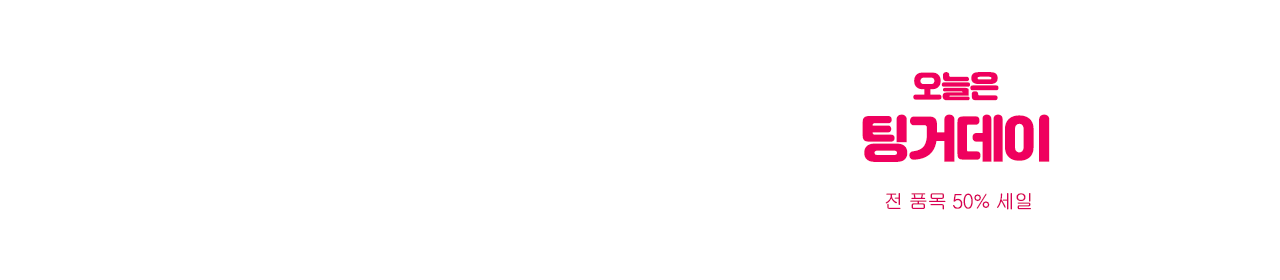
<style>
.page{position:relative;width:1280px;height:280px;background:#ffffff}
.page>*{position:absolute;margin:0}
.t1{font:50px "JalnanOTF";letter-spacing:-0.05em;color:#ef005e}
.t2{font:30px "JalnanOTF";letter-spacing:-0.05em;color:#ef005e}
.t3{font:20px "Gulim";letter-spacing:-0.05em;color:#d90055}
</style>
<div class="page">
<p class="t1" style="left:862px;top:72px;width:188px;height:90px;text-align:center"><span class="t2">오늘은<br></span>팅거데이</p>
<p class="t3" style="left:885px;top:193px;width:146px;height:17px">전 품목 50% 세일</p>
</div>
